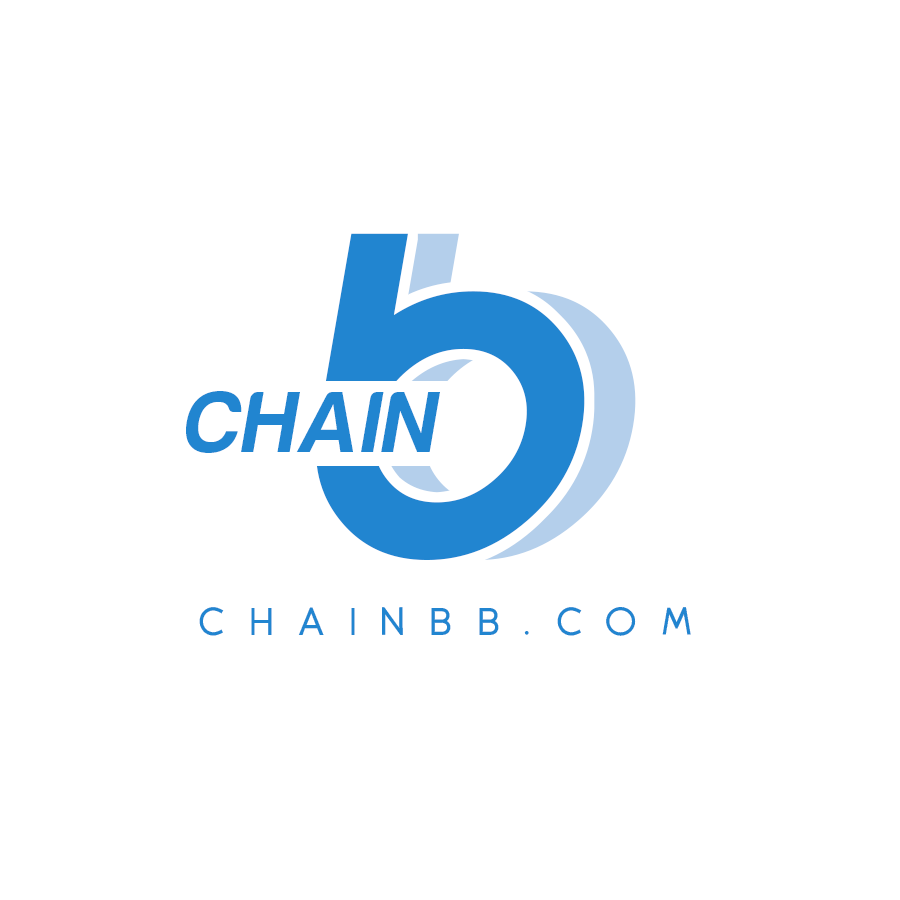
<style>
.page{position:relative;width:900px;height:900px;background:#ffffff}
.page>*{position:absolute;margin:0}
.t1{font:393.4px "AndThenItEnds";letter-spacing:0.02em;color:#2185d0;text-transform:uppercase;font-style:italic}
.t2{font:88.5px "HarabaraMaisBold-HarabaraMaisBold";letter-spacing:0.02em;color:#2185d0;text-transform:uppercase;font-style:italic}
.t3{font:38.9px "Glode-Medium";letter-spacing:0.66em;color:#2185d0;text-transform:uppercase}
</style>
<div class="page">
<p class="t1" style="left:315px;top:233px;width:270px;height:327px">B</p>
<p class="t2" style="left:186px;top:391px;width:254px;height:62px">Chain</p>
<p class="t3" style="left:199px;top:607px;width:492px;height:29px">chainbb.com</p>
</div>
